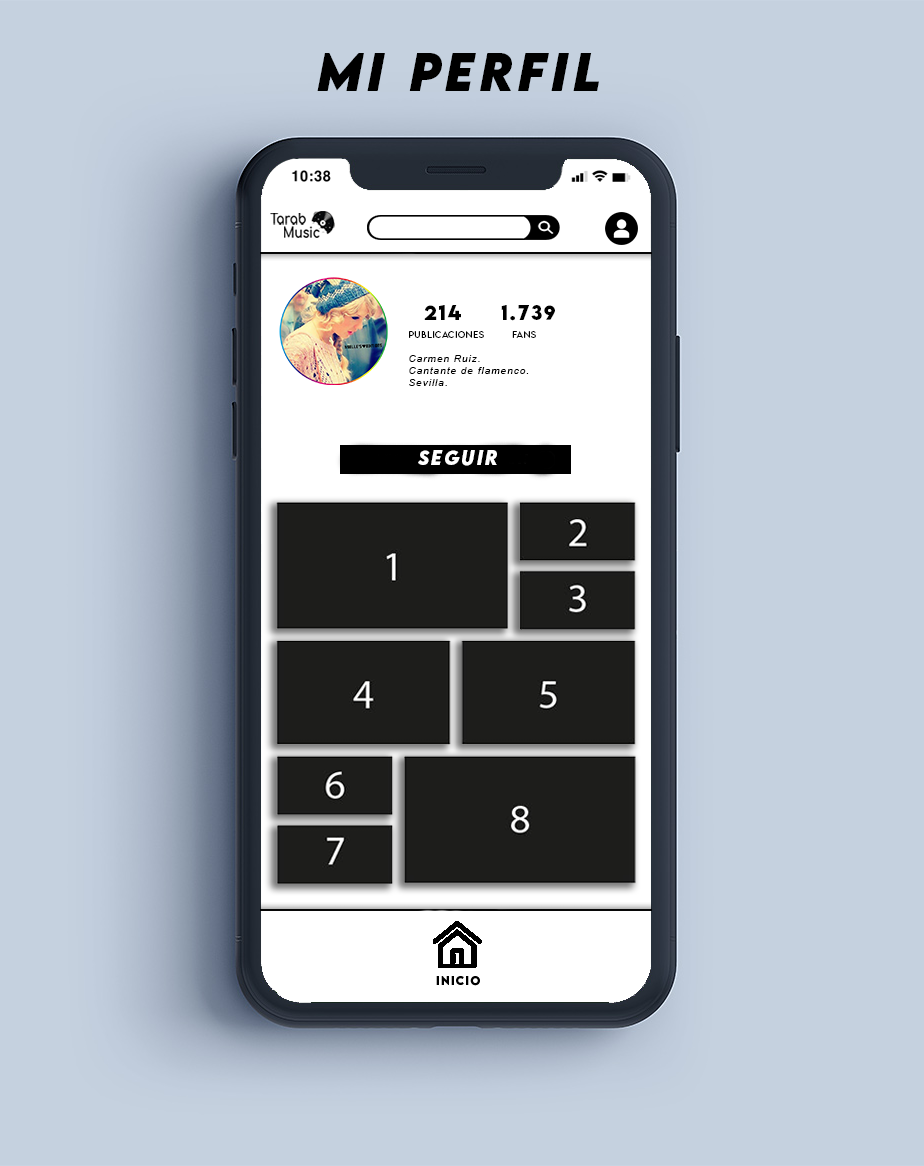
<style>
.page{position:relative;width:924px;height:1166px;background:#c5d1df}
.page>*{position:absolute;margin:0}
.t1{font:48px "LEMONMILK-BoldItalic";letter-spacing:0.1em;color:#000000}
.t2{font:18px "LEMONMILK-Bold";letter-spacing:0.1em;color:#000000}
.t3{font:8px "LEMONMILK-Light";letter-spacing:0.1em;color:#000000}
.t4{font:10px "Arial-ItalicMT";letter-spacing:0.1em;color:#000000}
.t5{font:18px "LEMONMILK-BoldItalic";letter-spacing:0.1em;color:#ffffff}
</style>
<div class="page">
<p class="t1" style="left:317px;top:53px;width:282px;height:38px">mi perfil</p>
<p class="t2" style="left:424px;top:305px;width:37px;height:15px">214</p>
<p class="t2" style="left:501px;top:305px;width:54px;height:16px">1.739</p>
<p class="t3" style="left:409px;top:331px;width:75px;height:7px">publicaciones</p>
<p class="t3" style="left:512px;top:331px;width:24px;height:7px">FANS</p>
<p class="t4" style="left:409px;top:355px;width:120px;height:31px">Carmen Ruiz.<br>Cantante de flamenco.<br>Sevilla.</p>
<p class="t5" style="left:418px;top:450px;width:79px;height:16px">seguir</p>
</div>
